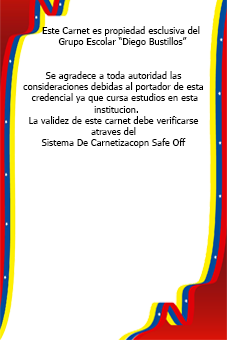
<style>
.page{position:relative;width:227px;height:340px;background:#ffffff}
.page>*{position:absolute;margin:0}
.t1{font:9.3px "Tahoma";color:#000000}
</style>
<div class="page">
<p class="t1" style="left:42px;top:26px;width:158px;height:21px;text-align:center">Este Carnet es propiedad esclusiva del <br>Grupo Escolar “Diego Bustillos”</p>
<p class="t1" style="left:23px;top:71px;width:180px;height:77px;text-align:center">Se agradece a toda autoridad las <br>consideraciones debidas al portador de esta <br>credencial ya que cursa estudios en esta<br> institucion.<br>La validez de este carnet debe verificarse <br>atraves del <br>Sistema De Carnetizacopn Safe Off</p>
</div>
